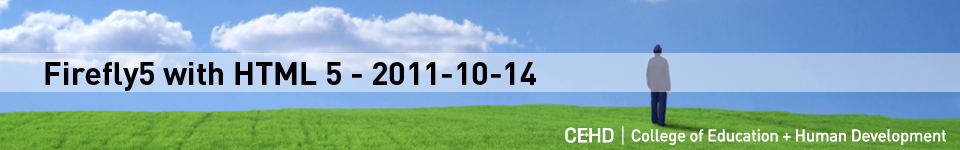
<style>
.page{position:relative;width:960px;height:150px}
.page>*{position:absolute;margin:0}
.t1{font:32px "DINOT-Bold";color:#000000}
</style>
<div class="page">
<p class="t1" style="left:45px;top:62px;width:491px;height:29px">Firefly5 with HTML 5 - 2011-10-14</p>
</div>
